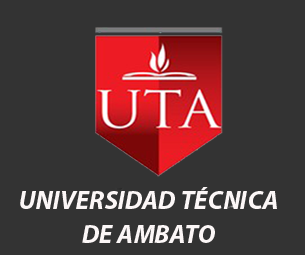
<style>
.page{position:relative;width:305px;height:255px;background:#333333}
.page>*{position:absolute;margin:0}
.t1{font:26px "MyriadPro-BoldIt";color:#fcf7f7}
</style>
<div class="page">
<p class="t1" style="left:20px;top:187px;width:257px;height:56px;text-align:center">UNIVERSIDAD TÉCNICA<br>DE AMBATO</p>
</div>
